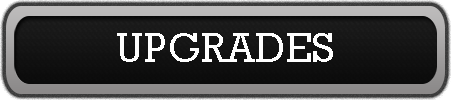
<style>
.page{position:relative;width:451px;height:100px}
.page>*{position:absolute;margin:0}
.t1{font:41.7px "Rockwell";color:#ffffff}
</style>
<div class="page">
<p class="t1" style="left:117px;top:33px;width:216px;height:29px">UPGRADES</p>
</div>
